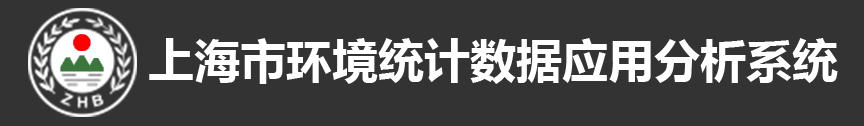
<style>
.page{position:relative;width:864px;height:126px;background:#333333}
.page>*{position:absolute;margin:0}
.t1{font:46px "MicrosoftYaHei-Bold";color:#ffffff}
</style>
<div class="page">
<p class="t1" style="left:149px;top:38px;width:689px;height:46px">上海市环境统计数据应用分析系统</p>
</div>
